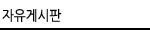
<style>
.page{position:relative;width:150px;height:30px;background:#ffffff}
.page>*{position:absolute;margin:0}
.t1{font:14px "NanumGothic";color:#000000;scale:0.9 1}
</style>
<div class="page">
<p class="t1" style="left:2px;top:9px;width:60px;height:13px">자유게시판</p>
</div>
